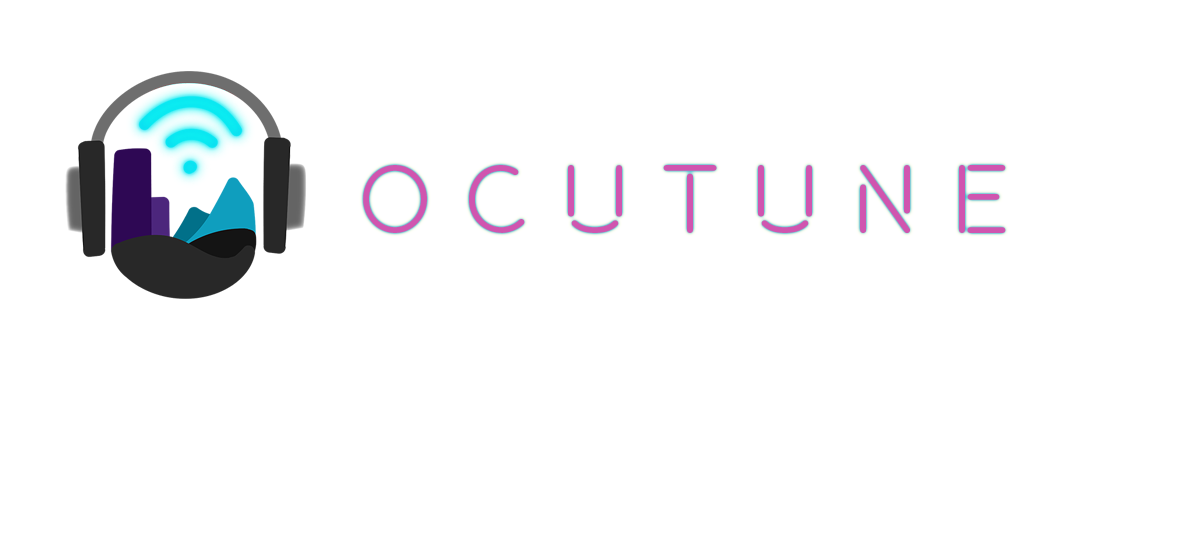
<style>
.page{position:relative;width:1200px;height:550px;background:#ffffff}
.page>*{position:absolute;margin:0}
.t1{font:97px "Beon-Medium";letter-spacing:0.32em;color:#d055af;scale:1.03 1}
</style>
<div class="page">
<p class="t1" style="left:363px;top:165px;width:643px;height:68px">Ocutune</p>
</div>
